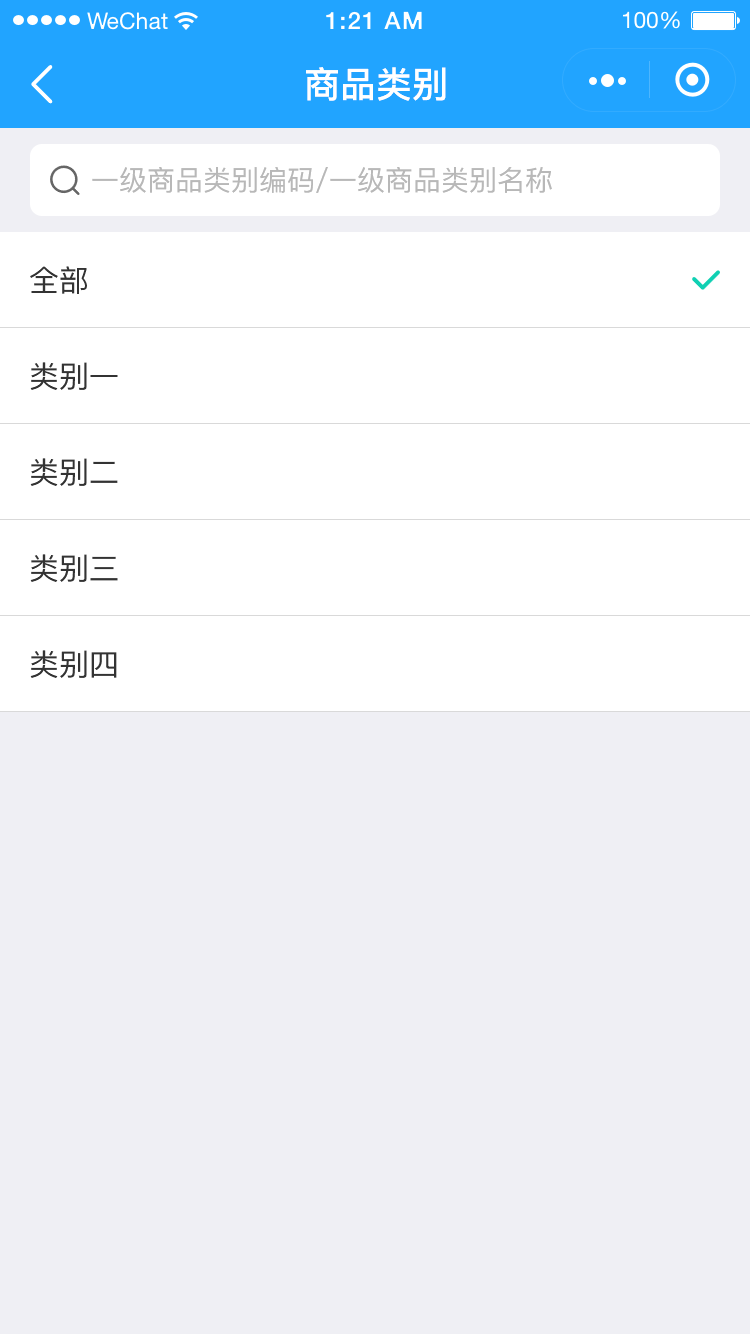
<style>
.page{position:relative;width:750px;height:1334px;background:#efeff4}
.page>*{position:absolute;margin:0}
.t1{font:36px "PingFang-SC-Bold";color:#ffffff}
.t2{font:28px "PingFang-SC-Medium";color:#b8b8b8}
.t3{font:30px "PingFang-SC-Medium";color:#333333}
</style>
<div class="page">
<p class="t1" style="left:306px;top:67px;width:140px;height:34px">商品类别</p>
<p class="t2" style="left:92px;top:167px;width:460px;height:26px">一级商品类别编码/一级商品类别名称</p>
<p class="t3" style="left:30px;top:266px;width:57px;height:28px">全部</p>
<p class="t3" style="left:30px;top:362px;width:88px;height:28px">类别一</p>
<p class="t3" style="left:30px;top:458px;width:88px;height:28px">类别二</p>
<p class="t3" style="left:30px;top:554px;width:88px;height:28px">类别三</p>
<p class="t3" style="left:30px;top:650px;width:87px;height:28px">类别四</p>
</div>
